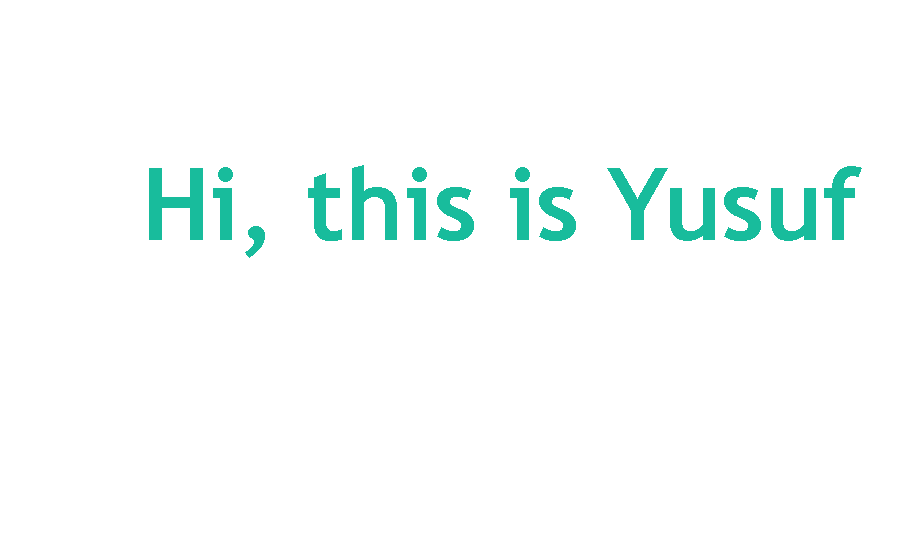
<style>
.page{position:relative;width:920px;height:550px;background:#ffffff}
.page>*{position:absolute;margin:0}
.t1{font:99.9px "TrebuchetMS-Bold";color:#18bc9c}
</style>
<div class="page">
<p class="t1" style="left:149px;top:165px;width:713px;height:93px">Hi, this is Yusuf</p>
</div>
